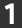
<style>
.page{position:relative;width:22px;height:28px;background:#333333}
.page>*{position:absolute;margin:0}
.t1{font:30px "ProductSans-Bold";color:#ffffff}
</style>
<div class="page">
<p class="t1" style="left:4px;top:3px;width:10px;height:21px">1</p>
</div>
